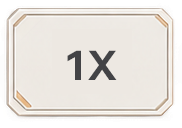
<style>
.page{position:relative;width:182px;height:128px;background:#ede8e2}
.page>*{position:absolute;margin:0}
.t1{font:40px "HarmonyOS_Sans_SC_Bold";letter-spacing:-0.01em;color:#434346}
</style>
<div class="page">
<p class="t1" style="left:67px;top:50px;width:50px;height:30px">1X</p>
</div>
